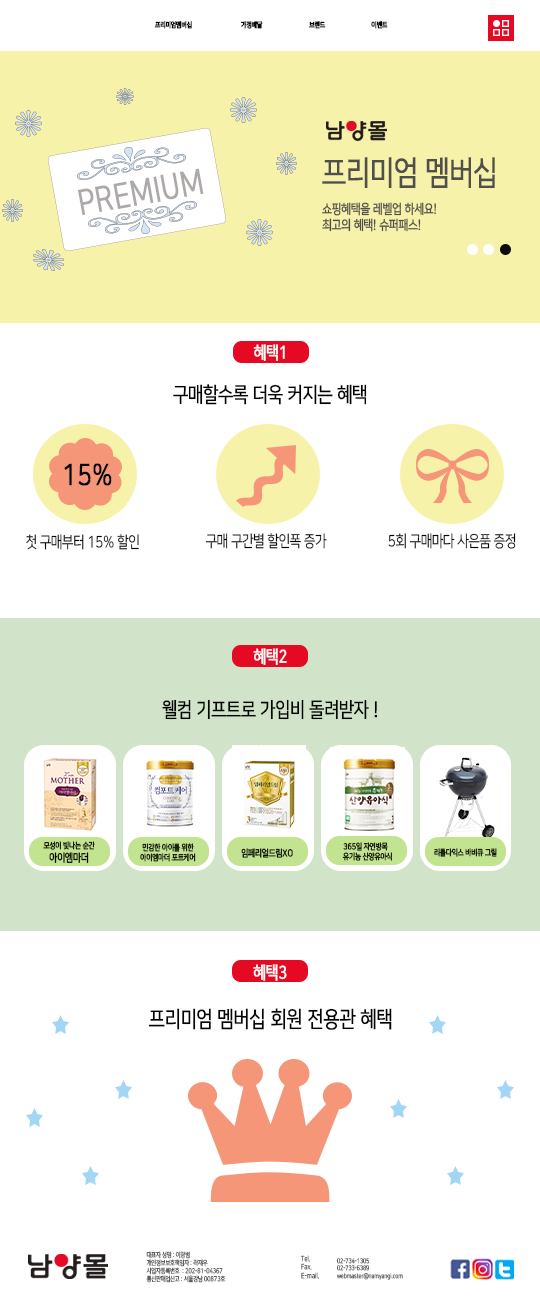
<style>
.page{position:relative;width:540px;height:1300px;background:#ffffff}
.page>*{position:absolute;margin:0}
.t1{font:7.3px "NanumSquare_acR";color:#09090a;font-weight:bold;scale:0.81 1}
.t2{font:33.4px "NanumSquare_acR";color:#514e4e;font-weight:bold;scale:0.81 1}
.t3{font:34.5px "NanumSquare_acR";color:#aea9a9;font-weight:bold;scale:0.81 1}
.t4{font:13.3px "NanumSquare_acR";color:#514e4e;font-weight:bold;scale:0.81 1}
.t5{font:17.4px "NanumSquare_acR";color:#fdfdfd;font-weight:bold;scale:0.81 1}
.t6{font:20.9px "NanumSquare_acR";color:#010101;font-weight:bold;scale:0.81 1}
.t7{font:29.2px "NanumSquare_acR";color:#050404;font-weight:bold;scale:0.81 1}
.t8{font:15.9px "NanumSquare_acR";color:#050404;scale:0.81 1}
.t9{font:20.6px "NanumSquare_acR";color:#050404;font-weight:bold;scale:0.81 1}
.t10{font:8.2px "NanumSquare_acR";color:#000000;font-weight:bold;scale:0.81 1}
.t11{font:11px "NanumSquare_acR";color:#000000;font-weight:bold;scale:0.81 1}
.t12{font:8.2px "NanumSquare_acR";font-weight:bold;scale:0.81 1}
.t13{font:9.6px "NanumSquare_acR";color:#000000;font-weight:bold;scale:0.81 1}
.t14{font:22.2px "NanumSquare_acR";color:#050404;font-weight:bold;scale:0.81 1}
.t15{font:6.7px "NanumSquare_acR";color:#5f5e5e;scale:0.81 1}
.t16{font:7.1px "NanumSquare_acR";color:#5f5e5e;scale:0.81 1}
.t17{font:6.4px "NanumSquare_acR";color:#5f5e5e;scale:0.81 1}
</style>
<div class="page">
<p class="t1" style="left:154px;top:21px;width:38px;height:8px">프리미엄멤버십</p>
<p class="t1" style="left:241px;top:21px;width:22px;height:8px">가정배달</p>
<p class="t1" style="left:309px;top:21px;width:17px;height:8px">브랜드</p>
<p class="t1" style="left:371px;top:21px;width:17px;height:8px">이벤트</p>
<p class="t2" style="left:322px;top:157px;width:173px;height:31px">프리미엄 멤버십</p>
<p class="t3" style="left:78px;top:168px;width:126px;height:47px;rotate:-10deg">PREMIUM</p>
<p class="t4" style="left:322px;top:202px;width:114px;height:30px">쇼핑혜택을 레벨업 하세요!<br>최고의 혜택! 슈퍼패스!</p>
<p class="t5" style="left:253px;top:344px;width:32px;height:17px">혜택1</p>
<p class="t6" style="left:173px;top:384px;width:194px;height:21px">구매할수록 더욱 커지는 혜택</p>
<p class="t7" style="left:64px;top:463px;width:48px;height:23px">15%</p>
<p class="t8" style="left:26px;top:534px;width:113px;height:16px">첫 구매부터 15% 할인</p>
<p class="t8" style="left:205px;top:533px;width:122px;height:16px">구매 구간별 할인폭 증가</p>
<p class="t8" style="left:388px;top:533px;width:128px;height:16px">5회 구매마다 사은품 증정</p>
<p class="t5" style="left:253px;top:648px;width:34px;height:17px">혜택2</p>
<p class="t9" style="left:162px;top:699px;width:216px;height:21px">웰컴 기프트로 가입비 돌려받자 !</p>
<p class="t10" style="left:43px;top:841px;width:52px;height:22px;text-align:center">모성이 빛나는 순간<br><span class="t11">아이엠마더</span></p>
<p class="t12" style="left:142px;top:843px;width:52px;height:9px">민감한 아이를 위한</p>
<p class="t12" style="left:343px;top:842px;width:45px;height:9px">365일 자연방목</p>
<p class="t12" style="left:140px;top:853px;width:56px;height:9px">아이엠마더 포트케어</p>
<p class="t13" style="left:241px;top:848px;width:52px;height:10px">임페리얼드림XO</p>
<p class="t10" style="left:342px;top:852px;width:50px;height:9px">유기농 산양유아식</p>
<p class="t10" style="left:434px;top:848px;width:63px;height:9px">리틀다익스 바비큐 그릴</p>
<p class="t5" style="left:253px;top:964px;width:34px;height:17px">혜택3</p>
<p class="t14" style="left:148px;top:1008px;width:244px;height:22px">프리미엄 멤버십 회원 전용관 혜택</p>
<p class="t15" style="left:146px;top:1251px;width:80px;height:32px">대표자 성명 : 이광범<br>개인정보보호책임자 : 곽재우    <br>사업자등록번호  : 202-81-04367 <br>통신판매업신고 : 서울강남 00873호</p>
<p class="t16" style="left:300px;top:1255px;width:19px;height:24px">Tel.<br>Fax.<br>E-mail.</p>
<p class="t17" style="left:337px;top:1258px;width:66px;height:22px">02-734-1305<br>02-733-6389<br>webmaster@namyangi.com</p>
</div>
